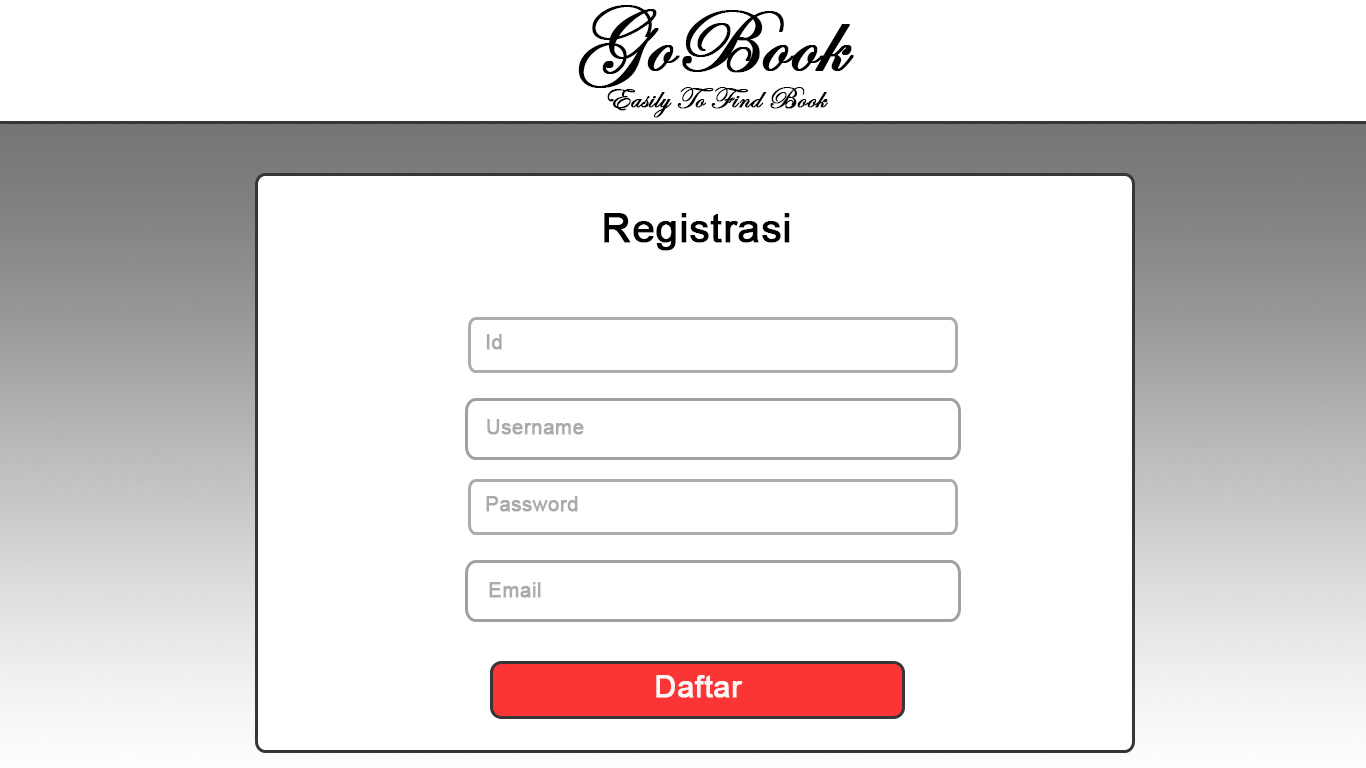
<style>
.page{position:relative;width:1366px;height:768px;background:#ffffff}
.page>*{position:absolute;margin:0}
.t1{font:90px "EdwardianScriptITC";color:#000000;font-weight:bold}
.t2{font:30.4px "EdwardianScriptITC";color:#000000;font-weight:bold}
.t3{font:40.4px "ArialMT";color:#000000;font-weight:bold}
.t4{font:20.4px "ArialMT";color:#aaaaaa;font-weight:bold}
.t5{font:30.4px "ArialMT";color:#f9f7f7;font-weight:bold}
</style>
<div class="page">
<p class="t1" style="left:578px;top:5px;width:276px;height:83px">GoBook</p>
<p class="t2" style="left:607px;top:87px;width:221px;height:31px">Easily To Find Book</p>
<p class="t3" style="left:604px;top:213px;width:186px;height:38px">Registrasi</p>
<p class="t4" style="left:486px;top:334px;width:16px;height:16px">Id</p>
<p class="t4" style="left:487px;top:419px;width:97px;height:16px">Username</p>
<p class="t4" style="left:486px;top:496px;width:92px;height:16px">Password</p>
<p class="t4" style="left:489px;top:582px;width:52px;height:16px">Email</p>
<p class="t5" style="left:656px;top:675px;width:87px;height:23px">Daftar</p>
</div>
